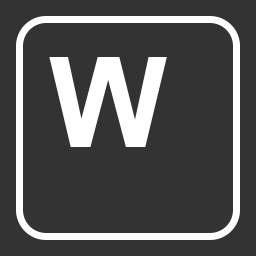
<style>
.page{position:relative;width:256px;height:256px;background:#333333}
.page>*{position:absolute;margin:0}
.t1{font:125px "Arial-BoldMT";color:#ffffff}
</style>
<div class="page">
<p class="t1" style="left:49px;top:57px;width:118px;height:90px">W</p>
</div>
